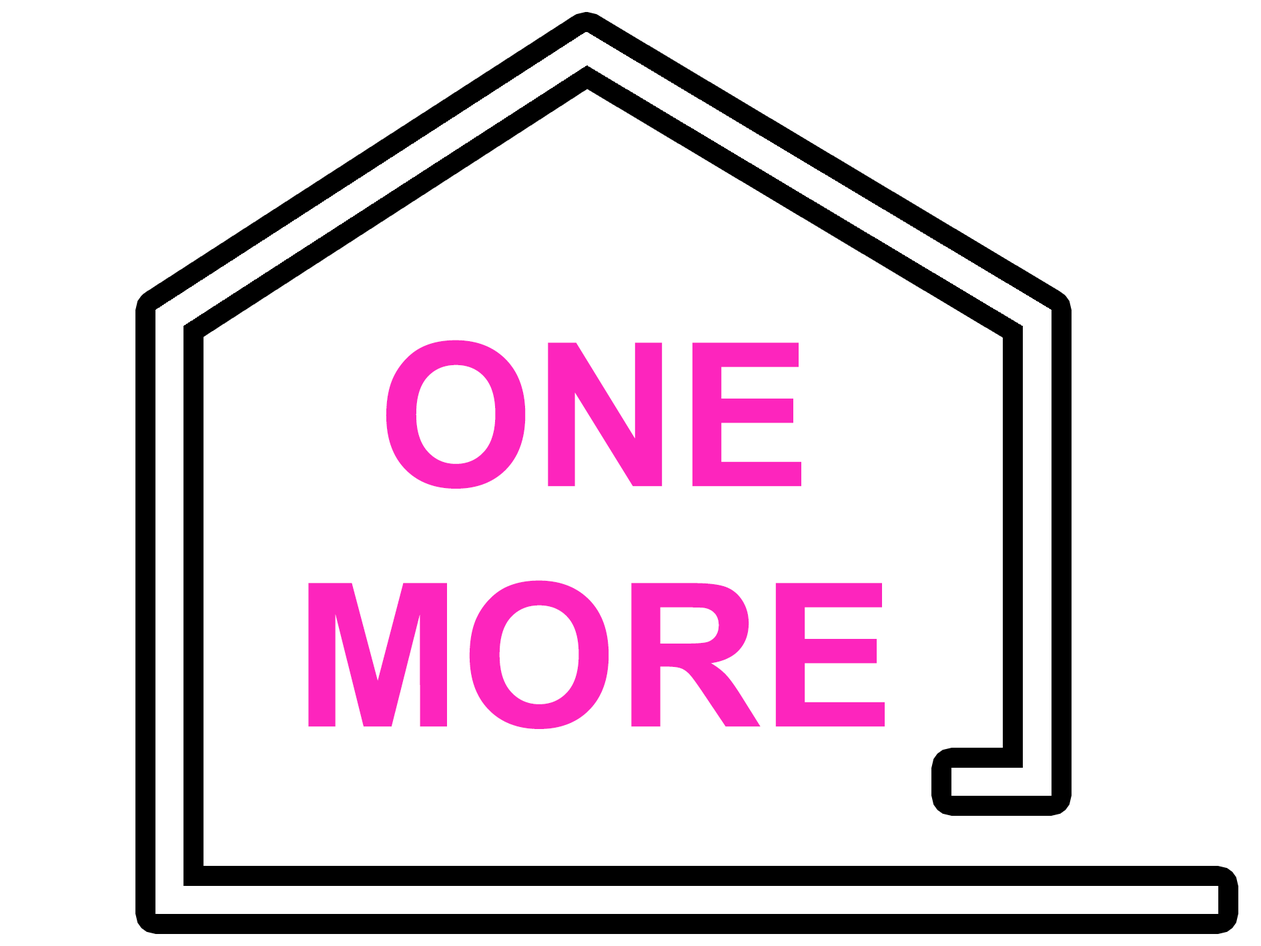
<style>
.page{position:relative;width:1261px;height:946px;background:#ffffff}
.page>*{position:absolute;margin:0}
.t1{font:200.2px "Arial-BoldMT";color:#fd25bd}
</style>
<div class="page">
<p class="t1" style="left:308px;top:340px;width:577px;height:389px;text-align:center">ONE<br>MORE</p>
</div>
